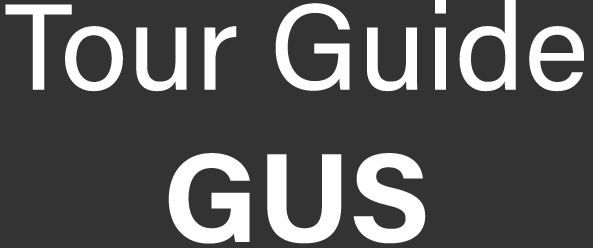
<style>
.page{position:relative;width:593px;height:248px;background:#333333}
.page>*{position:absolute;margin:0}
.t1{font:122px "AcuminPro-Regular";color:#ffffff}
.t2{font:127px "AcuminPro-Bold";color:#ffffff}
</style>
<div class="page">
<p class="t1" style="left:5px;top:0px;width:579px;height:244px;text-align:center">Tour Guide<br><span class="t2">GUS</span></p>
</div>
